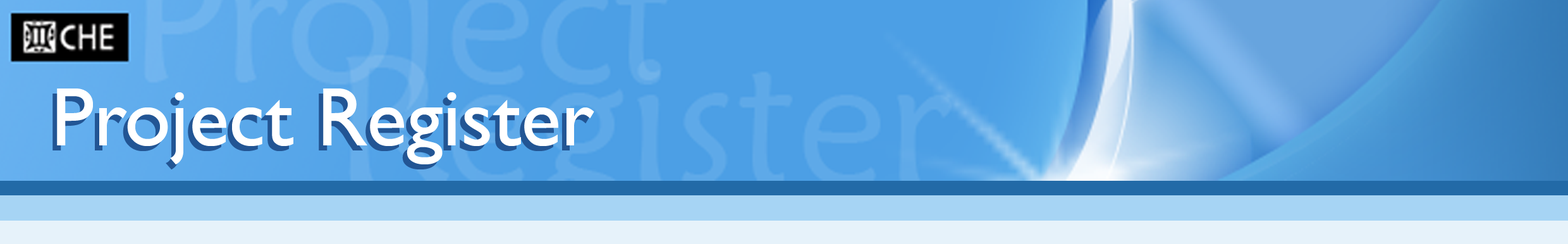
<style>
.page{position:relative;width:1568px;height:244px}
.page>*{position:absolute;margin:0}
.t1{font:83.5px "GillSansMT";color:#ffffff}
.t2{font:83.5px "GillSansMT"}
</style>
<div class="page">
<p class="t1" style="left:57px;top:89px;width:537px;height:75px">Project Register</p>
<p class="t2" style="left:52px;top:94px;width:538px;height:75px">Project Register</p>
</div>
